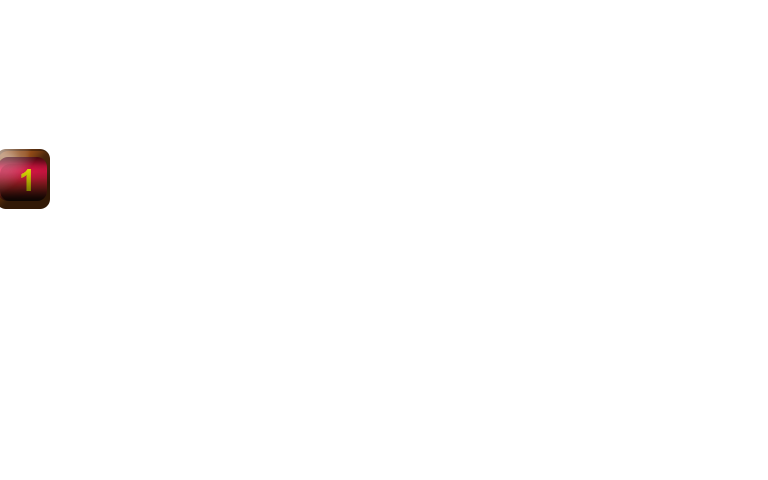
<style>
.page{position:relative;width:768px;height:480px;background:#ffffff}
.page>*{position:absolute;margin:0}
.t1{font:30px "Arial-BoldMT"}
</style>
<div class="page">
<p class="t1" style="left:21px;top:169px;width:10px;height:22px">1</p>
</div>
